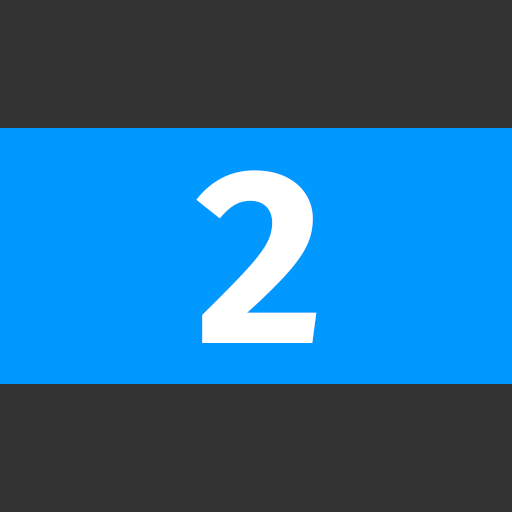
<style>
.page{position:relative;width:512px;height:512px;background:#333333}
.page>*{position:absolute;margin:0}
.t1{font:250px "FiraSans-Bold";color:#ffffff}
</style>
<div class="page">
<p class="t1" style="left:196px;top:170px;width:121px;height:173px">2</p>
</div>
